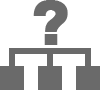
<style>
.page{position:relative;width:100px;height:100px;background:#ffffff}
.page>*{position:absolute;margin:0}
.t1{font:60px "Swiss721BT-Heavy";color:#6a6a6a;font-weight:bold}
</style>
<div class="page">
<p class="t1" style="left:33px;top:0px;width:35px;height:45px">?</p>
</div>
